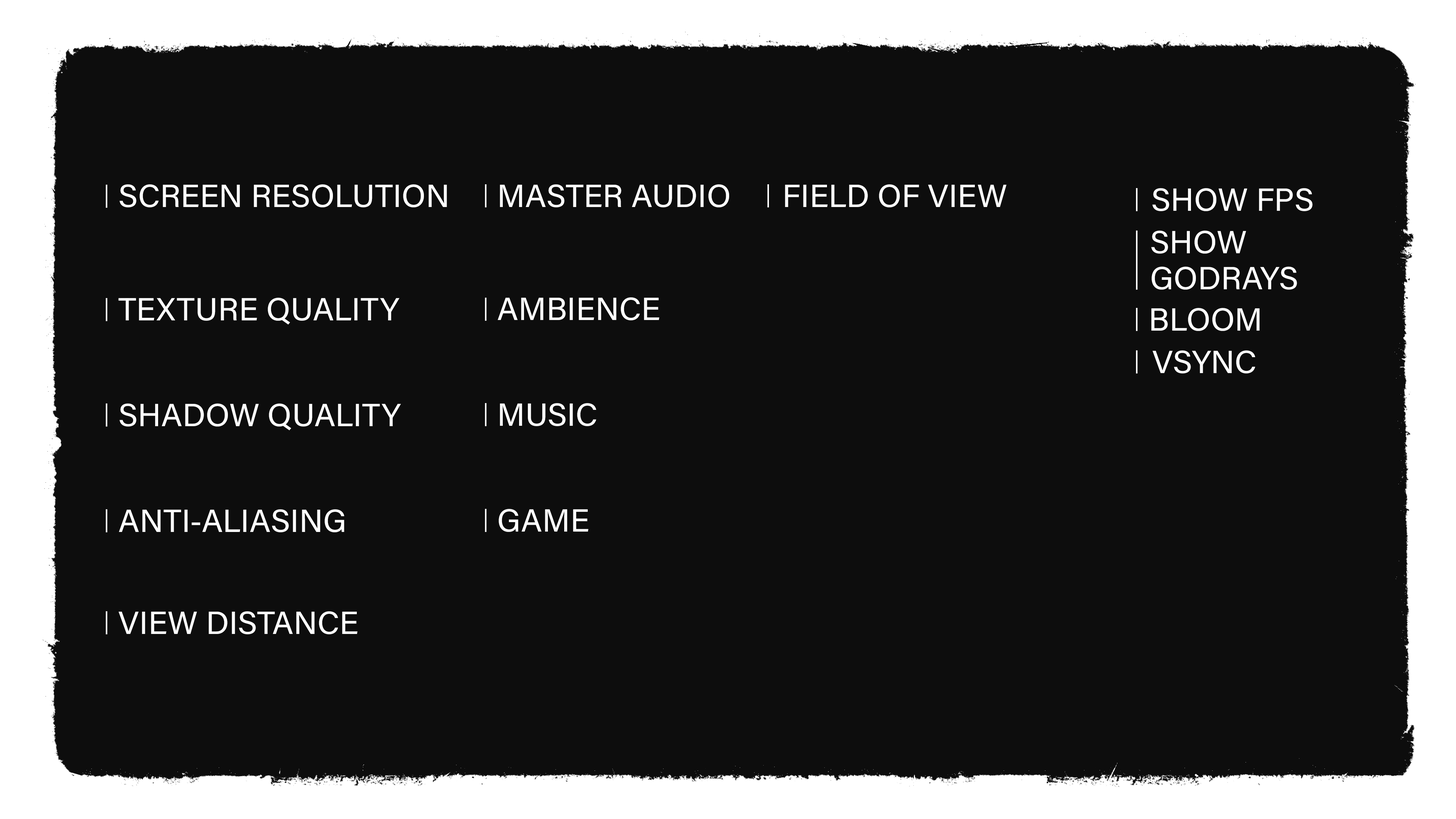
<style>
.page{position:relative;width:1456px;height:819px;background:#0d0d0d}
.page>*{position:absolute;margin:0}
.t1{font:32.1px "AcuminConcept-Regular";color:#ffffff;font-weight:bold}
.t2{font:32.1px/36.1px "AcuminConcept-Regular";color:#ffffff;font-weight:bold}
</style>
<div class="page">
<p class="t1" style="left:119px;top:184px;width:328px;height:23px">SCREEN RESOLUTION</p>
<p class="t1" style="left:500px;top:184px;width:229px;height:23px">MASTER AUDIO</p>
<p class="t1" style="left:785px;top:184px;width:222px;height:23px">FIELD OF VIEW</p>
<p class="t1" style="left:1152px;top:188px;width:161px;height:23px">SHOW FPS</p>
<p class="t2" style="left:1151px;top:231px;width:146px;height:59px">SHOW<br>GODRAYS</p>
<p class="t1" style="left:118px;top:298px;width:282px;height:27px">TEXTURE QUALITY</p>
<p class="t1" style="left:497px;top:297px;width:162px;height:23px">AMBIENCE</p>
<p class="t1" style="left:1151px;top:308px;width:109px;height:23px">BLOOM</p>
<p class="t1" style="left:1152px;top:350px;width:103px;height:23px">VSYNC</p>
<p class="t1" style="left:119px;top:403px;width:282px;height:27px">SHADOW QUALITY</p>
<p class="t1" style="left:500px;top:403px;width:96px;height:23px">MUSIC</p>
<p class="t1" style="left:119px;top:509px;width:225px;height:23px">ANTI-ALIASING</p>
<p class="t1" style="left:499px;top:509px;width:89px;height:23px">GAME</p>
<p class="t1" style="left:118px;top:611px;width:240px;height:23px">VIEW DISTANCE</p>
</div>
